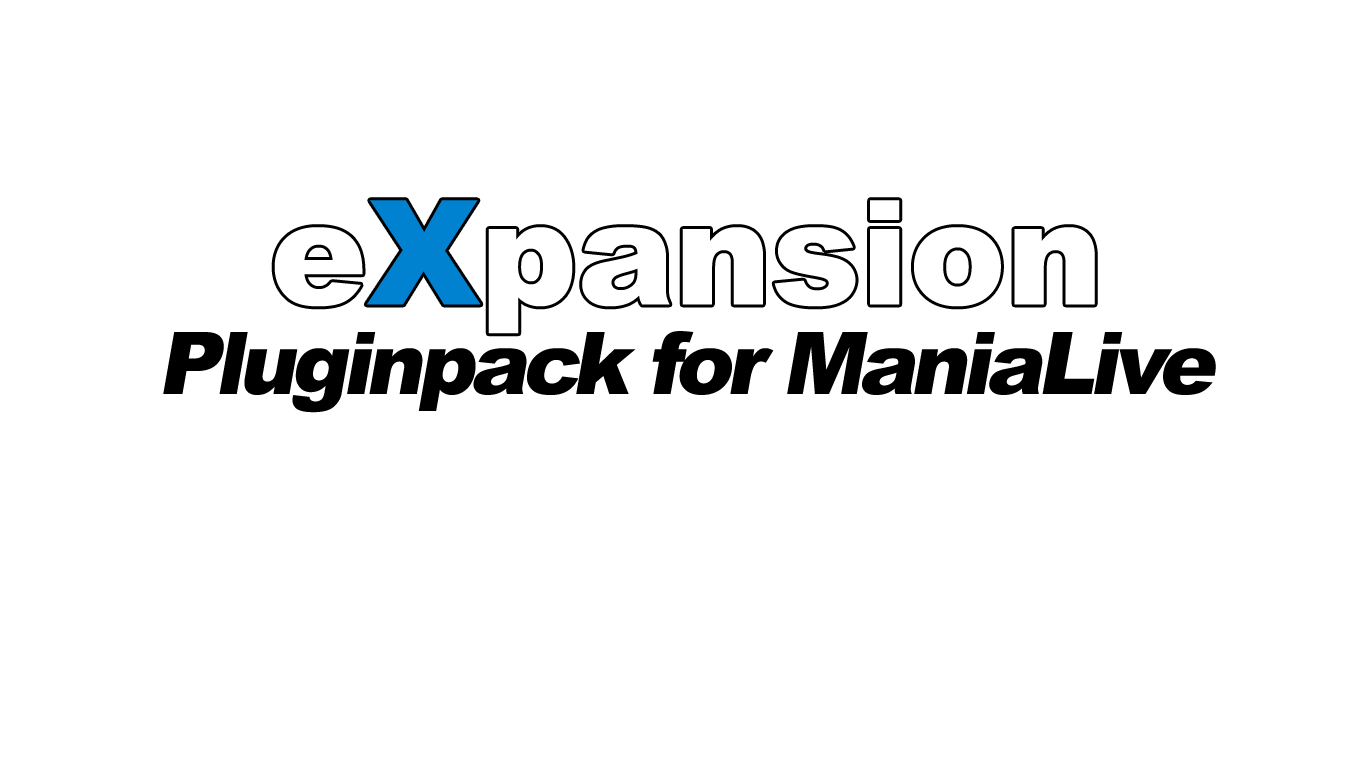
<style>
.page{position:relative;width:1366px;height:768px;background:#ffffff}
.page>*{position:absolute;margin:0}
.t1{font:86.5px "Arial-Black";letter-spacing:-0.065em;color:#000000;font-style:italic}
</style>
<div class="page">
<p class="t1" style="left:163px;top:331px;width:1053px;height:82px">Pluginpack for ManiaLive</p>
</div>
